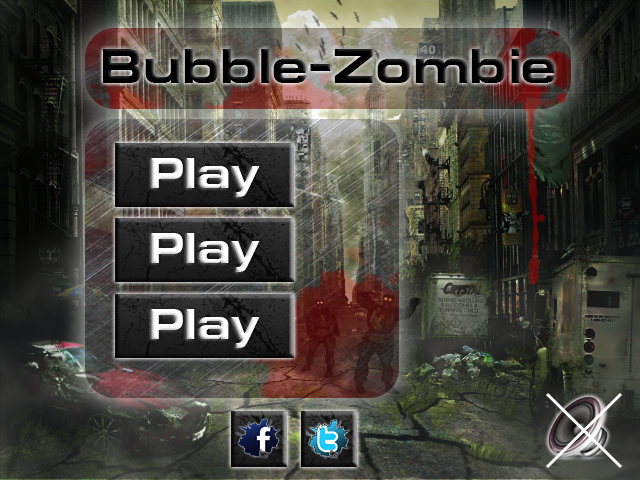
<style>
.page{position:relative;width:640px;height:480px}
.page>*{position:absolute;margin:0}
.t1{font:48.8px "EuropeExtBold";color:#000000}
.t2{font:43.8px "EuropeExtBold";color:#ffffff}
</style>
<div class="page">
<p class="t1" style="left:103px;top:49px;width:452px;height:34px">Bubble-Zombie</p>
<p class="t2" style="left:151px;top:158px;width:109px;height:39px">Play</p>
<p class="t2" style="left:151px;top:233px;width:109px;height:39px">Play</p>
<p class="t2" style="left:151px;top:309px;width:109px;height:39px">Play</p>
</div>
